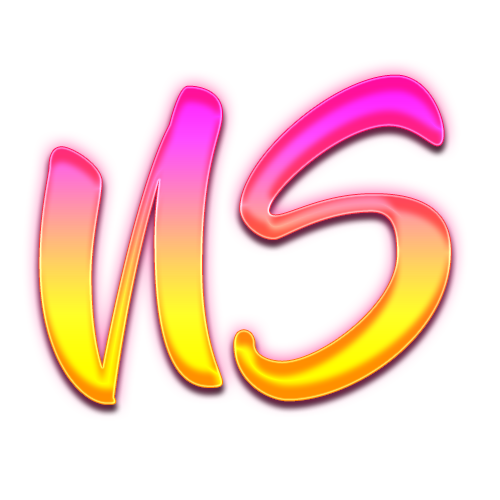
<style>
.page{position:relative;width:500px;height:500px;background:#ffffff}
.page>*{position:absolute;margin:0}
.t1{font:312.6px "BeyondTheMountains"}
</style>
<div class="page">
<p class="t1" style="left:39px;top:75px;width:412px;height:329px">NS</p>
</div>
